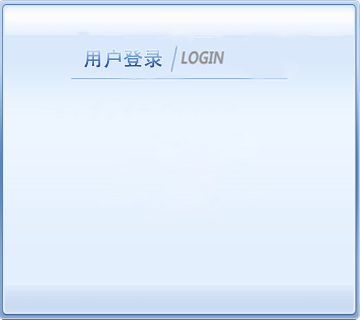
<style>
.page{position:relative;width:360px;height:320px}
.page>*{position:absolute;margin:0}
.t1{font:20px "AdobeHeitiStd-Regular"}
</style>
<div class="page">
<p class="t1" style="left:84px;top:49px;width:78px;height:19px">用户登录</p>
</div>
